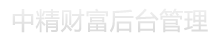
<style>
.page{position:relative;width:210px;height:40px;background:#ffffff}
.page>*{position:absolute;margin:0}
.t1{font:24px "MicrosoftYaHei";letter-spacing:0.03em;color:#e6e6e6;text-transform:uppercase}
</style>
<div class="page">
<p class="t1" style="left:12px;top:8px;width:196px;height:25px">中精财富后台管理</p>
</div>
